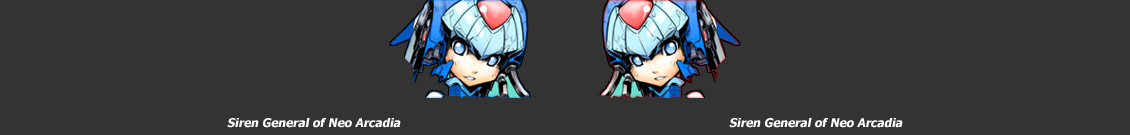
<style>
.page{position:relative;width:1130px;height:135px;background:#333333}
.page>*{position:absolute;margin:0}
.t1{font:12px "Tahoma-Bold";color:#ffffff;font-style:italic}
</style>
<div class="page">
<p class="t1" style="left:729px;top:118px;width:174px;height:10px">Siren General of Neo Arcadia</p>
</div>
